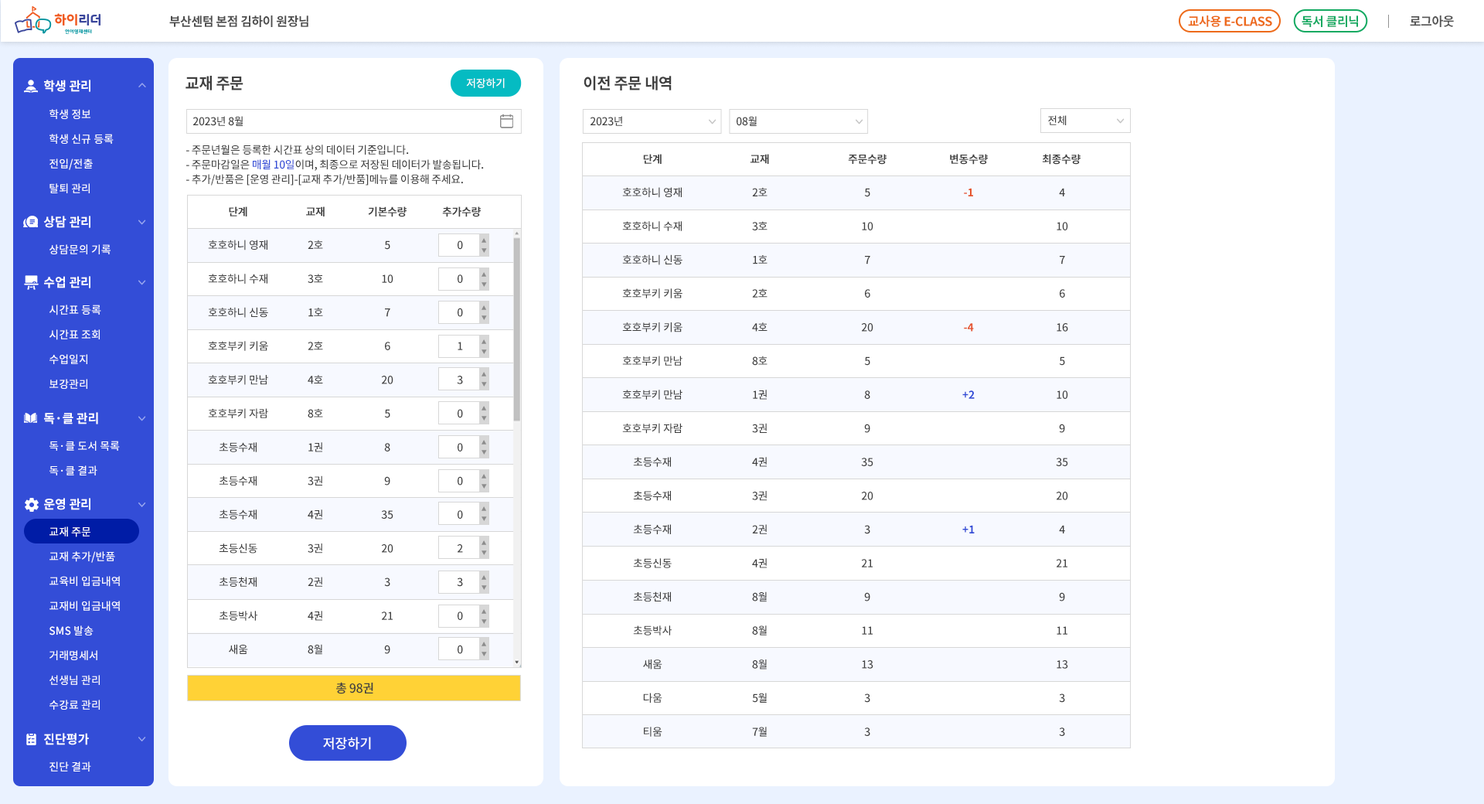
<style>
.page{position:relative;width:1484px;height:804px;background:#ffffff}
.page>*{position:absolute;margin:0}
.t1{font:12.4px "NotoSansCJKkr-Bold";letter-spacing:-0.025em;color:#4d4d4d}
.t2{font:12.4px "NotoSansCJKkr-Bold";letter-spacing:-0.025em;color:#ed6a1a}
.t3{font:12.4px "NotoSansCJKkr-Bold";letter-spacing:-0.025em;color:#13a961}
.t4{font:12.4px "NotoSansCJKkr-Bold";letter-spacing:-0.025em;color:#565656}
.t5{font:15.5px "NotoSansCJKkr-Bold";letter-spacing:-0.025em;color:#404040}
.t6{font:12.4px "NotoSansCJKkr-Bold";color:#ffffff}
.t7{font:10.8px "NotoSansCJKkr-Medium";letter-spacing:-0.025em;color:#ffffff}
.t8{font:10.8px/24.7px "NotoSansCJKkr-Medium";color:#ffffff}
.t9{font:10.8px "NotoSansCJKkr-Medium";letter-spacing:-0.025em;color:#404040}
.t10{font:10.8px/14.7px "NotoSansCJKkr-Medium";letter-spacing:-0.025em;color:#404040}
.t11{font:10.8px/14.7px "NotoSansCJKkr-Medium";letter-spacing:-0.025em;color:#334dd7}
.t12{font:10.8px "NotoSansCJKkr-Bold";letter-spacing:-0.025em;color:#404040}
.t13{font:10.8px/33.7px "NotoSansCJKkr-Medium";letter-spacing:-0.025em;color:#404040}
.t14{font:10.8px/33.7px "NotoSansCJKkr-Bold";letter-spacing:-0.025em;color:#e5542d}
.t15{font:10.8px/33.7px "NotoSansCJKkr-Bold";letter-spacing:-0.025em;color:#334dd7}
.t16{font:10.8px "NotoSansCJKkr-Medium";color:#ffffff}
.t17{font:12.4px "NotoSansCJKkr-Medium";letter-spacing:-0.025em;color:#404040}
.t18{font:13.5px "NotoSansCJKkr-Medium";color:#ffffff}
</style>
<div class="page">
<p class="t1" style="left:169px;top:15px;width:139px;height:12px">부산센텀 본점 김하이 원장님</p>
<p class="t2" style="left:1188px;top:15px;width:84px;height:12px">교사용 E-CLASS</p>
<p class="t3" style="left:1301px;top:15px;width:57px;height:12px">독서 클리닉</p>
<p class="t4" style="left:1410px;top:15px;width:44px;height:12px">로그아웃</p>
<p class="t5" style="left:185px;top:76px;width:58px;height:14px">교재 주문</p>
<p class="t5" style="left:583px;top:76px;width:89px;height:14px">이전 주문 내역</p>
<p class="t6" style="left:44px;top:80px;width:46px;height:12px">학생 관리</p>
<p class="t7" style="left:466px;top:78px;width:39px;height:10px">저장하기</p>
<p class="t8" style="left:49px;top:109px;width:65px;height:84px">학생 정보<br>학생 신규 등록<br>전입/전출<br>탈퇴 관리</p>
<p class="t9" style="left:192px;top:116px;width:51px;height:10px">2023년 8월</p>
<p class="t9" style="left:590px;top:116px;width:32px;height:10px">2023년</p>
<p class="t9" style="left:736px;top:116px;width:21px;height:10px">08월</p>
<p class="t9" style="left:1048px;top:115px;width:18px;height:10px">전체</p>
<p class="t10" style="left:186px;top:145px;width:298px;height:40px">- 주문년월은 등록한 시간표 상의 데이터 기준입니다.<br>- 주문마감일은 <span class="t11">매월 10일</span>이며, 최종으로 저장된 데이터가 발송됩니다.<br>- 추가/반품은 [운영 관리]-[교재 추가/반품]메뉴를 이용해 주세요.</p>
<p class="t12" style="left:643px;top:154px;width:18px;height:10px">단계</p>
<p class="t12" style="left:750px;top:154px;width:19px;height:10px">교재</p>
<p class="t12" style="left:848px;top:154px;width:38px;height:11px">주문수량</p>
<p class="t12" style="left:950px;top:154px;width:38px;height:11px">변동수량</p>
<p class="t12" style="left:1042px;top:154px;width:38px;height:11px">최종수량</p>
<p class="t13" style="left:622px;top:187px;width:60px;height:549px;text-align:center">호호하니 영재<br>호호하니 수재<br>호호하니 신동<br>호호부키 키움<br>호호부키 키움<br>호호부키 만남<br>호호부키 만남<br>호호부키 자람<br>초등수재<br>초등수재<br>초등수재<br>초등신동<br>초등천재<br>초등박사<br>새움<br>다움<br>티움</p>
<p class="t13" style="left:752px;top:187px;width:15px;height:549px;text-align:center">2호<br>3호<br>1호<br>2호<br>4호<br>8호<br>1권<br>3권<br>4권<br>3권<br>2권<br>4권<br>8월<br>8월<br>8월<br>5월<br>7월</p>
<p class="t13" style="left:861px;top:188px;width:12px;height:548px;text-align:center">5<br>10<br>7<br>6<br>20<br>5<br>8<br>9<br>35<br>20<br>3<br>21<br>9<br>11<br>13<br>3<br>3</p>
<p class="t14" style="left:962px;top:188px;width:12px;height:345px;text-align:center">-1<br><br><br><br>-4<br><br><span class="t15">+2<br><br><br><br>+1</span></p>
<p class="t13" style="left:1056px;top:188px;width:12px;height:548px;text-align:center">4<br>10<br>7<br>6<br>16<br>5<br>10<br>9<br>35<br>20<br>4<br>21<br>9<br>11<br>13<br>3<br>3</p>
<p class="t12" style="left:229px;top:206px;width:18px;height:10px">단계</p>
<p class="t12" style="left:306px;top:206px;width:19px;height:10px">교재</p>
<p class="t12" style="left:368px;top:206px;width:38px;height:11px">기본수량</p>
<p class="t12" style="left:442px;top:206px;width:39px;height:11px">추가수량</p>
<p class="t6" style="left:43px;top:216px;width:47px;height:12px">상담 관리</p>
<p class="t16" style="left:49px;top:244px;width:62px;height:10px">상담문의 기록</p>
<p class="t13" style="left:208px;top:240px;width:60px;height:415px;text-align:center">호호하니 영재<br>호호하니 수재<br>호호하니 신동<br>호호부키 키움<br>호호부키 만남<br>호호부키 자람<br>초등수재<br>초등수재<br>초등수재<br>초등신동<br>초등천재<br>초등박사<br>새움</p>
<p class="t13" style="left:308px;top:240px;width:15px;height:415px;text-align:center">2호<br>3호<br>1호<br>2호<br>4호<br>8호<br>1권<br>3권<br>4권<br>3권<br>2권<br>4권<br>8월</p>
<p class="t13" style="left:381px;top:240px;width:12px;height:414px;text-align:center">5<br>10<br>7<br>6<br>20<br>5<br>8<br>9<br>35<br>20<br>3<br>21<br>9</p>
<p class="t13" style="left:457px;top:240px;width:6px;height:414px;text-align:center">0<br>0<br>0<br>1<br>3<br>0<br>0<br>0<br>0<br>2<br>3<br>0<br>0</p>
<p class="t6" style="left:44px;top:276px;width:46px;height:12px">수업 관리</p>
<p class="t8" style="left:49px;top:304px;width:52px;height:85px">시간표 등록<br>시간표 조회<br>수업일지<br>보강관리</p>
<p class="t6" style="left:44px;top:412px;width:54px;height:12px">독·클 관리</p>
<p class="t8" style="left:49px;top:440px;width:71px;height:35px">독·클 도서 목록<br>독·클 결과</p>
<p class="t6" style="left:44px;top:498px;width:46px;height:12px">운영 관리</p>
<p class="t8" style="left:49px;top:526px;width:71px;height:183px">교재 주문<br>교재 추가/반품<br>교육비 입금내역<br>교재비 입금내역<br>SMS 발송<br>거래명세서<br>선생님 관리<br>수강료 관리</p>
<p class="t17" style="left:336px;top:682px;width:37px;height:12px">총 98권</p>
<p class="t6" style="left:44px;top:733px;width:45px;height:12px">진단평가</p>
<p class="t18" style="left:323px;top:736px;width:48px;height:14px">저장하기</p>
<p class="t16" style="left:49px;top:761px;width:42px;height:10px">진단 결과</p>
</div>
